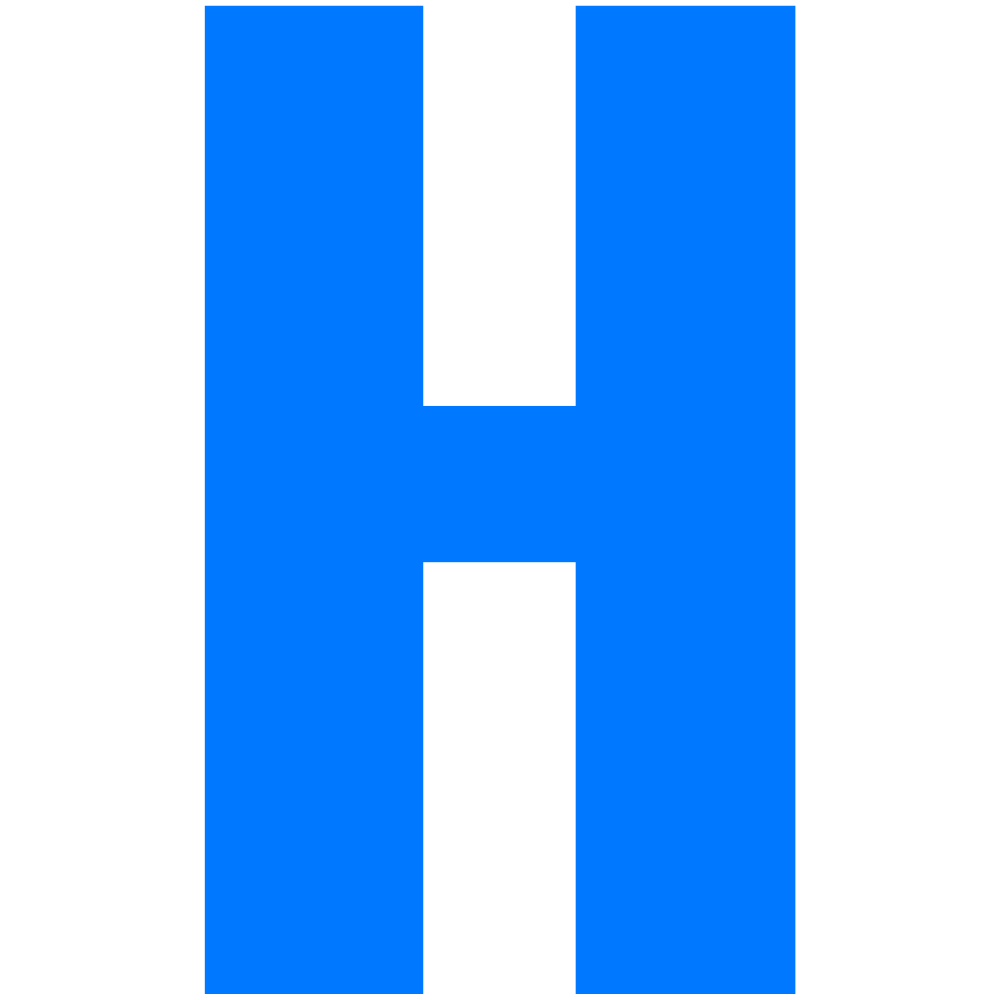
<style>
.page{position:relative;width:1000px;height:1000px;background:#ffffff}
.page>*{position:absolute;margin:0}
.t1{font:1220px "Oswald-Bold";color:#0078ff}
</style>
<div class="page">
<p class="t1" style="left:204px;top:5px;width:592px;height:989px">H</p>
</div>
